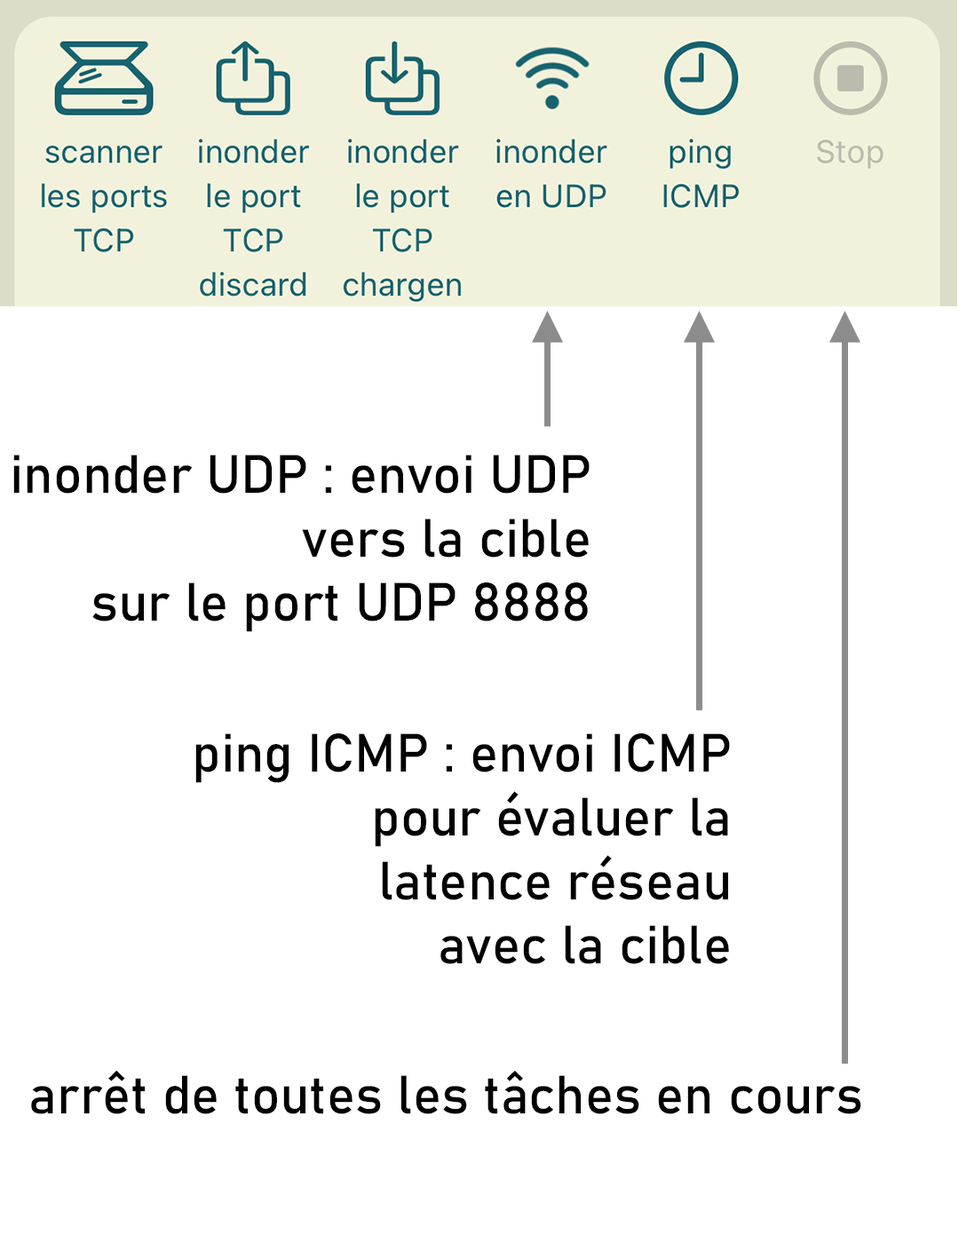
<style>
.page{position:relative;width:959px;height:1243px;background:#ffffff}
.page>*{position:absolute;margin:0}
.t1{font:53.3px "Bahnschrift";color:#000000}
</style>
<div class="page">
<p class="t1" style="left:13px;top:455px;width:577px;height:177px;text-align:right">inonder UDP : envoi UDP<br>vers la cible<br>sur le port UDP 8888</p>
<p class="t1" style="left:195px;top:734px;width:535px;height:230px;text-align:right">ping ICMP : envoi ICMP<br>pour évaluer la<br>latence réseau<br>avec la cible</p>
<p class="t1" style="left:31px;top:1070px;width:830px;height:45px">arrêt de toutes les tâches en cours</p>
</div>
